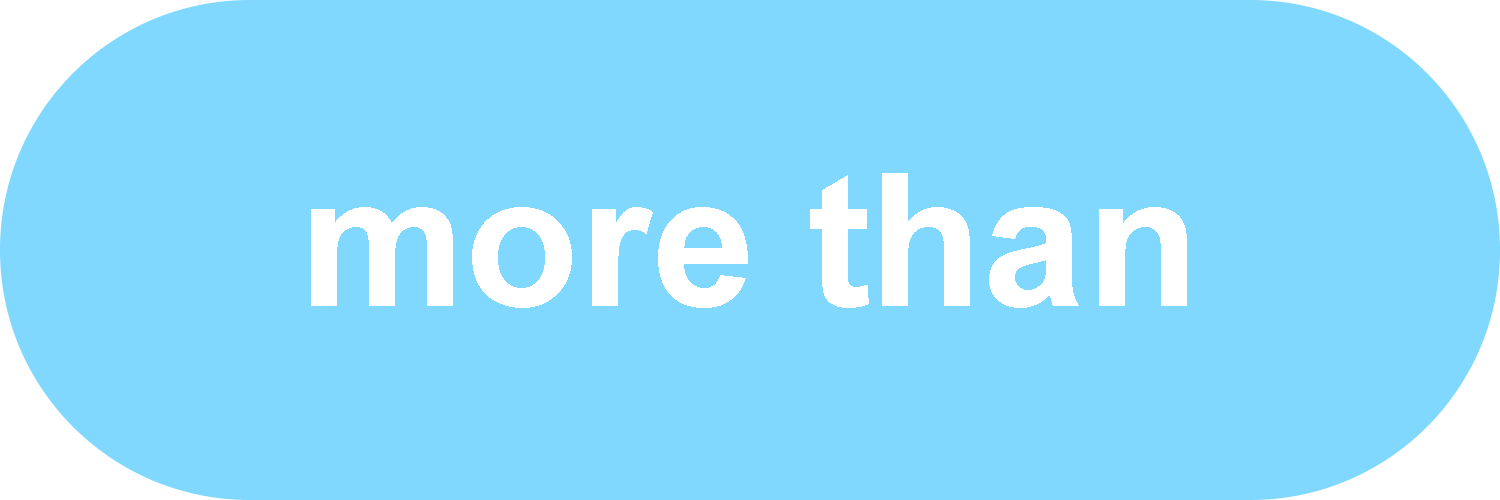
<style>
.page{position:relative;width:1500px;height:500px;background:#80d8ff}
.page>*{position:absolute;margin:0}
.t1{font:186.2px "Arial-BoldMT";color:#ffffff}
</style>
<div class="page">
<p class="t1" style="left:311px;top:173px;width:876px;height:135px">more than</p>
</div>
